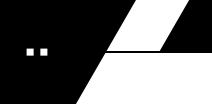
<style>
.page{position:relative;width:212px;height:104px;background:#000000}
.page>*{position:absolute;margin:0}
.t1{font:48px "Arial-BoldMT";letter-spacing:0.014em;color:#ffffff}
</style>
<div class="page">
<p class="t1" style="left:26px;top:48px;width:22px;height:8px">..</p>
</div>
